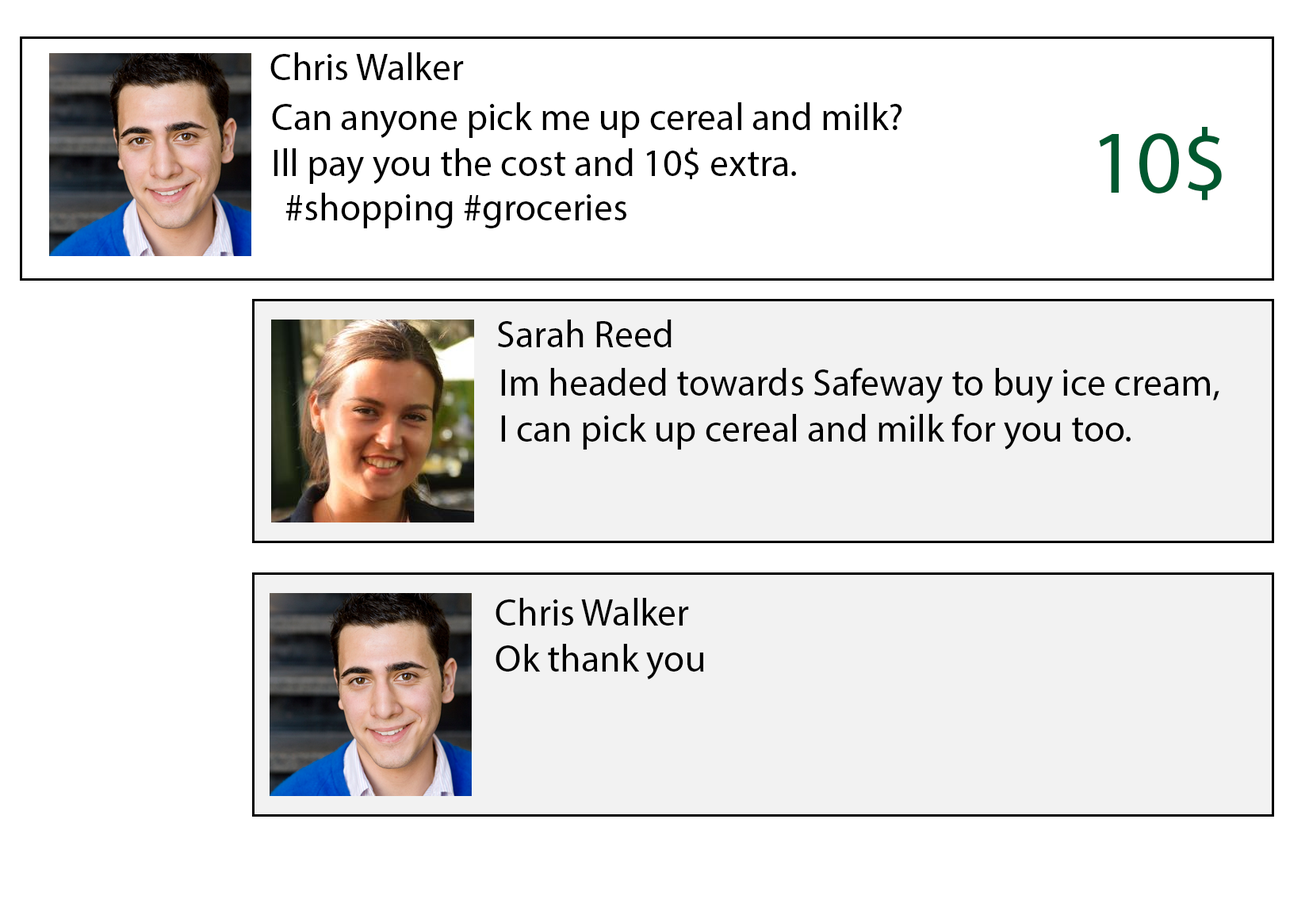
<style>
.page{position:relative;width:1309px;height:911px;background:#ffffff}
.page>*{position:absolute;margin:0}
.t1{font:38.1px "MyriadPro-Regular";color:#000000}
.t2{font:89.7px "MyriadPro-Regular";color:#00582f}
</style>
<div class="page">
<p class="t1" style="left:270px;top:52px;width:194px;height:28px">Chris Walker</p>
<p class="t1" style="left:272px;top:102px;width:630px;height:82px">Can anyone pick me up cereal and milk? <br>Ill pay you the cost and 10$ extra.</p>
<p class="t2" style="left:1099px;top:127px;width:123px;height:74px">10$</p>
<p class="t1" style="left:285px;top:193px;width:341px;height:35px">#shopping #groceries</p>
<p class="t1" style="left:498px;top:320px;width:174px;height:27px">Sarah Reed</p>
<p class="t1" style="left:501px;top:368px;width:718px;height:82px">Im headed towards Safeway to buy ice cream, <br>I can pick up cereal and milk for you too.</p>
<p class="t1" style="left:496px;top:598px;width:193px;height:28px">Chris Walker</p>
<p class="t1" style="left:496px;top:644px;width:208px;height:35px">Ok thank you</p>
</div>
